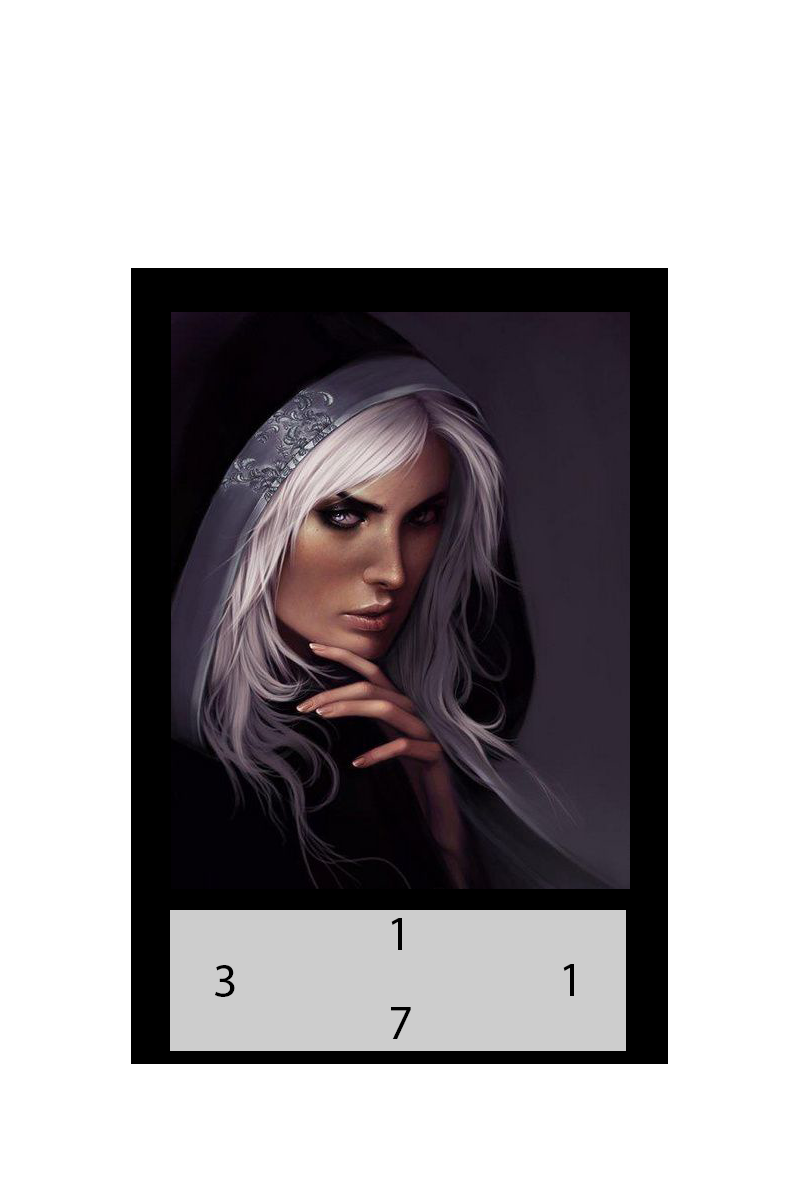
<style>
.page{position:relative;width:800px;height:1200px;background:#ffffff}
.page>*{position:absolute;margin:0}
.t1{font:48px "MyriadPro-Regular";color:#000000}
</style>
<div class="page">
<p class="t1" style="left:391px;top:918px;width:11px;height:32px">1</p>
<p class="t1" style="left:215px;top:965px;width:20px;height:32px">3</p>
<p class="t1" style="left:563px;top:964px;width:11px;height:32px">1</p>
<p class="t1" style="left:391px;top:1007px;width:20px;height:32px">7</p>
</div>
